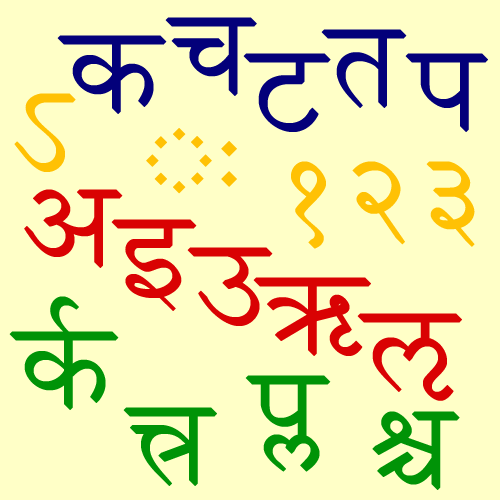
<style>
.page{position:relative;width:500px;height:500px;background:#ffffc7}
.page>*{position:absolute;margin:0}
.t1{font:120px "Siddhanta";color:#03007a}
.t2{font:120px "Siddhanta";color:#ffc104}
.t3{font:120px "Siddhanta";color:#d90203}
</style>
<div class="page">
<p class="t1" style="left:165px;top:17px;width:92px;height:79px">च</p>
<p class="t1" style="left:321px;top:29px;width:86px;height:79px">त</p>
<p class="t1" style="left:57px;top:35px;width:110px;height:79px">क</p>
<p class="t1" style="left:243px;top:53px;width:88px;height:79px">ट</p>
<p class="t1" style="left:405px;top:53px;width:83px;height:79px">प</p>
<p class="t2" style="left:14px;top:93px;width:62px;height:79px">ऽ</p>
<p class="t2" style="left:146px;top:128px;width:91px;height:66px">◌ः</p>
<p class="t2" style="left:291px;top:161px;width:184px;height:88px">१२३</p>
<p class="t3" style="left:24px;top:189px;width:99px;height:79px">अ</p>
<p class="t3" style="left:111px;top:219px;width:86px;height:92px">इ</p>
<p class="t3" style="left:187px;top:247px;width:86px;height:79px">उ</p>
<p class="t3" style="left:253px;top:277px;width:118px;height:79px">ऋ</p>
<p class="t3" style="left:357px;top:313px;width:105px;height:88px">ऌ</p>
</div>
